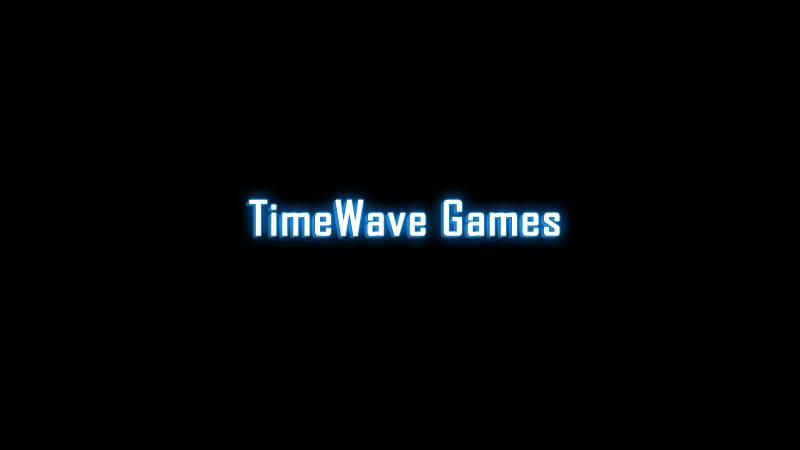
<style>
.page{position:relative;width:800px;height:450px;background:#000000}
.page>*{position:absolute;margin:0}
.t1{font:45px "AgencyFB-Reg";color:#ffffff;font-weight:bold;scale:1.2 1}
</style>
<div class="page">
<p class="t1" style="left:249px;top:199px;width:311px;height:37px">TimeWave Games</p>
</div>
